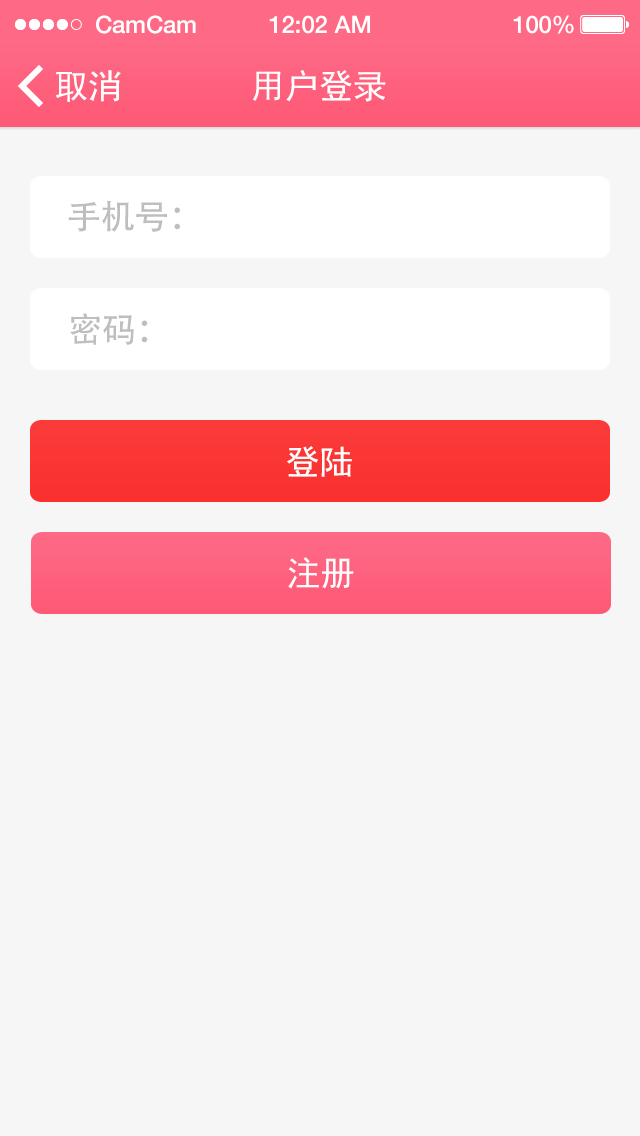
<style>
.page{position:relative;width:640px;height:1136px;background:#f6f6f6}
.page>*{position:absolute;margin:0}
.t1{font:24px "HelveticaNeue-Medium";color:#ffffff}
.t2{font:34px "SimHei";color:#ffffff}
.t3{font:34px "AdobeHeitiStd-Regular";color:#bebebe}
</style>
<div class="page">
<p class="t1" style="left:96px;top:15px;width:100px;height:19px">CamCam</p>
<p class="t1" style="left:269px;top:15px;width:101px;height:19px">12:02 AM</p>
<p class="t1" style="left:513px;top:15px;width:61px;height:19px">100%</p>
<p class="t2" style="left:56px;top:70px;width:65px;height:32px">取消</p>
<p class="t2" style="left:253px;top:70px;width:133px;height:32px">用户登录</p>
<p class="t3" style="left:68px;top:200px;width:112px;height:32px">手机号：</p>
<p class="t3" style="left:70px;top:313px;width:78px;height:32px">密码：</p>
<p class="t2" style="left:287px;top:446px;width:65px;height:31px">登陆</p>
<p class="t2" style="left:288px;top:557px;width:66px;height:32px">注册</p>
</div>
